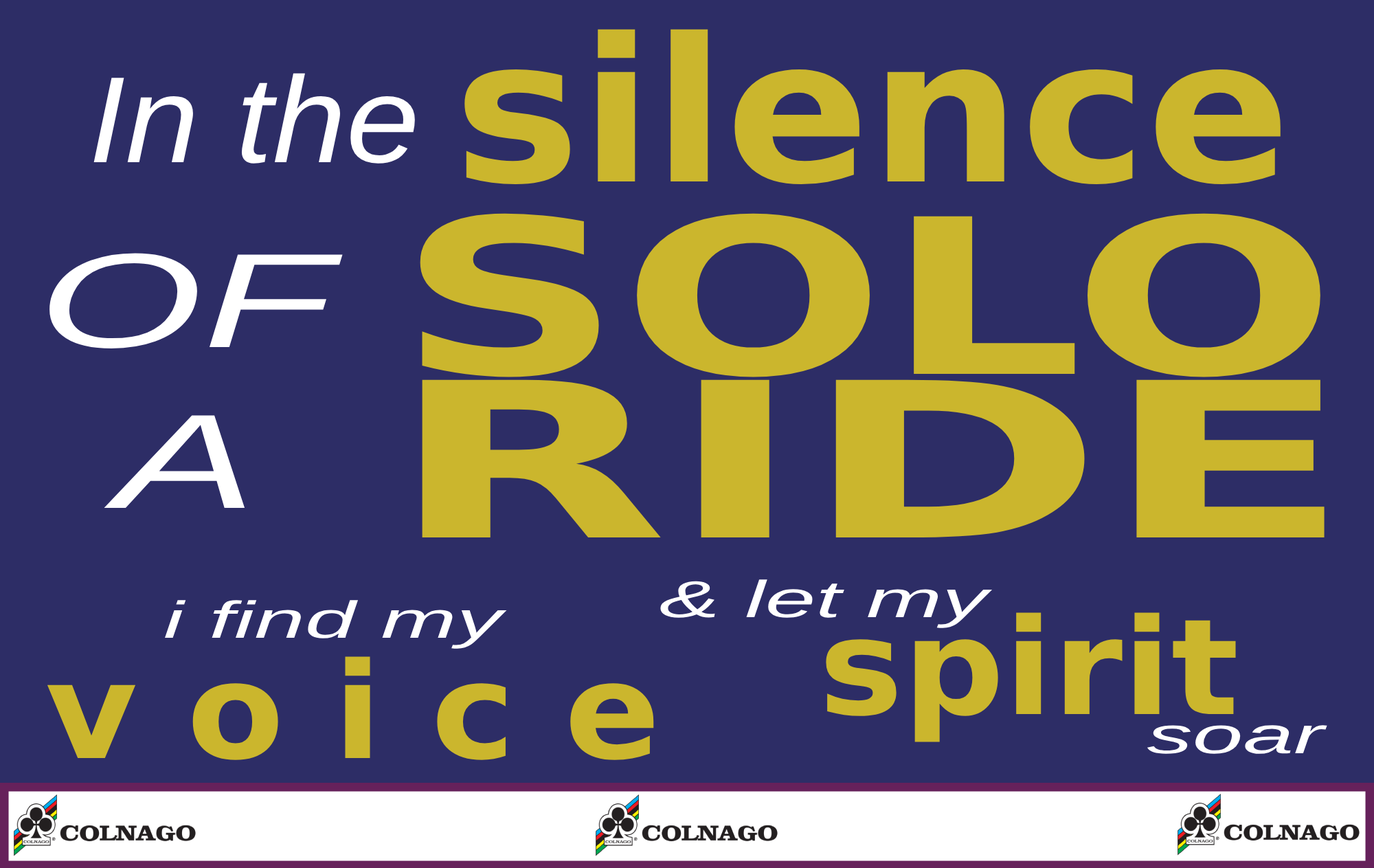
<style>
.page{position:relative;width:1374px;height:868px;background:#2d2d66}
.page>*{position:absolute;margin:0}
.t1{font:200.1px "Arial-Black";color:#cbb62d;scale:1.06 1}
.t2{font:122.6px "Arial-ItalicMT";color:#ffffff;scale:1.08 1}
.t3{font:216px "Arial-Black";color:#cbb62d;scale:1.44 1}
.t4{font:134.4px "Arial-ItalicMT";color:#ffffff;scale:1.58 1}
.t5{font:216px "Arial-Black";color:#cbb62d;scale:1.68 1}
.t6{font:51.9px "Arial-ItalicMT";color:#ffffff;scale:1.75 1}
.t7{font:133.4px "Arial-Black";color:#cbb62d;scale:1.06 1}
</style>
<div class="page">
<p class="t1" style="left:464px;top:29px;width:817px;height:156px">silence</p>
<p class="t2" style="left:93px;top:73px;width:322px;height:91px">In the</p>
<p class="t3" style="left:420px;top:213px;width:901px;height:164px">SOLO</p>
<p class="t4" style="left:49px;top:253px;width:294px;height:255px;text-align:center">OF<br>A</p>
<p class="t5" style="left:422px;top:379px;width:903px;height:158px">RIDE</p>
<p class="t6" style="left:660px;top:579px;width:333px;height:49px">&amp; let my</p>
<p class="t6" style="left:165px;top:600px;width:342px;height:49px">i find my</p>
<p class="t7" style="left:826px;top:612px;width:410px;height:130px">spirit</p>
<p class="t7" style="left:47px;top:656px;width:607px;height:104px">v o i c e</p>
<p class="t6" style="left:1147px;top:725px;width:180px;height:29px">soar</p>
</div>
